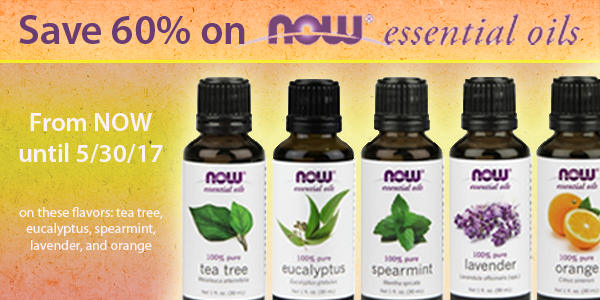
<style>
.page{position:relative;width:600px;height:300px}
.page>*{position:absolute;margin:0}
.t1{font:41.7px "MyriadPro-Semibold";color:#693d73}
.t2{font:26.2px "MyriadPro-Semibold";color:#f9f2fb}
.t3{font:13.9px "MyriadPro-Regular";color:#f9f2fb}
</style>
<div class="page">
<p class="t1" style="left:19px;top:15px;width:226px;height:29px">Save 60% on</p>
<p class="t2" style="left:19px;top:113px;width:144px;height:50px;text-align:center">From NOW until 5/30/17</p>
<p class="t3" style="left:19px;top:207px;width:144px;height:46px;text-align:center">on these flavors: tea tree, eucalyptus, spearmint, lavender, and orange</p>
</div>
